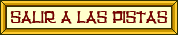
<style>
.page{position:relative;width:178px;height:35px;background:#ffffcc}
.page>*{position:absolute;margin:0}
.t1{font:17.5px "TikiHut";color:#770000;scale:0.94 1}
</style>
<div class="page">
<p class="t1" style="left:10px;top:11px;width:158px;height:13px">salir a las pistas</p>
<p class="t1" style="left:10px;top:11px;width:158px;height:13px">salir a las pistas</p>
</div>
